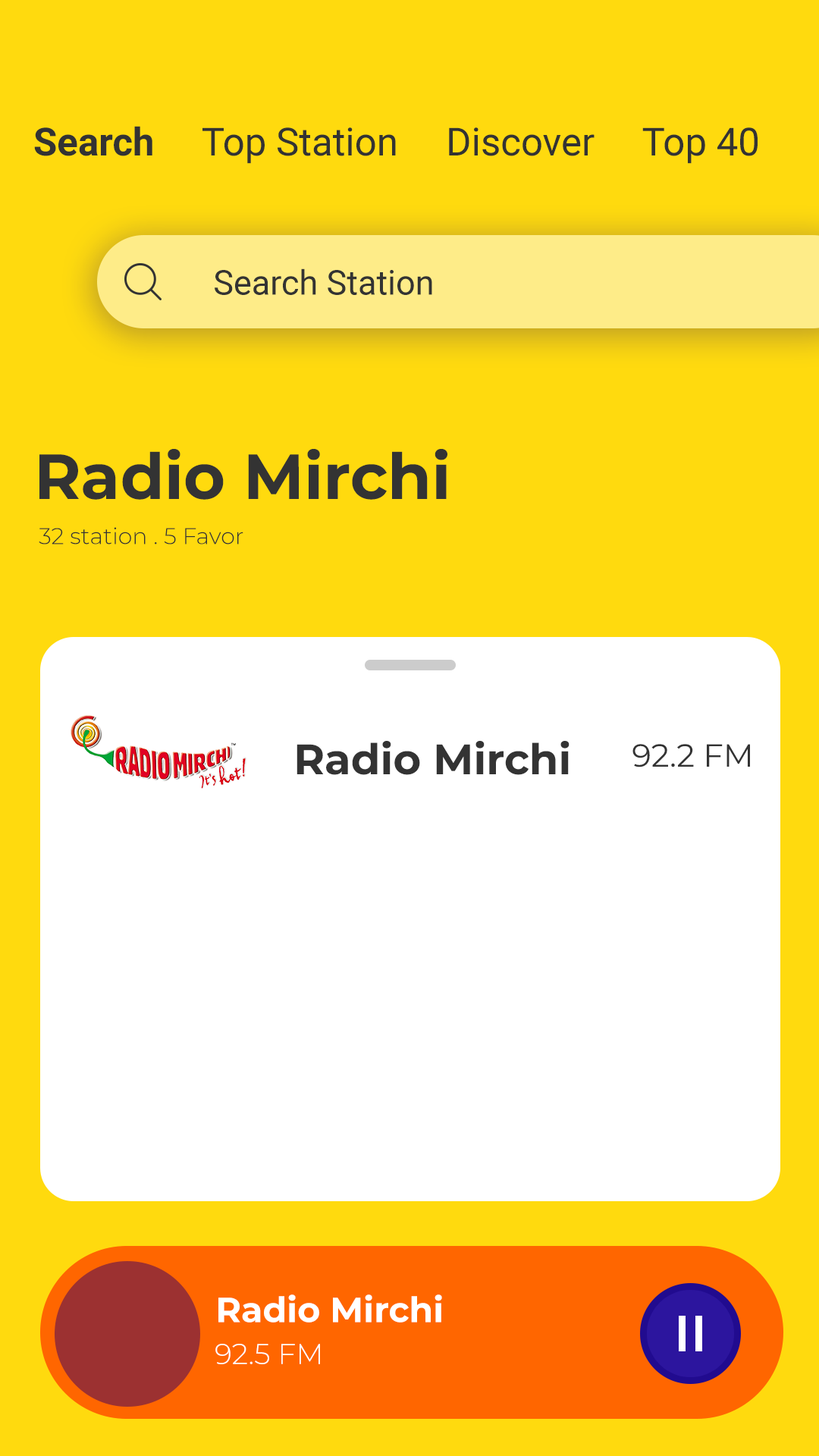
<style>
.page{position:relative;width:819px;height:1456px;background:#ffda0e}
.page>*{position:absolute;margin:0}
.t1{font:38.7px "Roboto-Regular";color:#333333}
.t2{font:38.7px "Roboto-Bold";color:#333333}
.t3{font:34.1px "Roboto-Regular";color:#333333}
.t4{font:63.7px "Montserrat-Bold";color:#333333}
.t5{font:22.7px "Montserrat-Light";color:#333333}
.t6{font:42.5px "Montserrat-Bold";color:#333333}
.t7{font:31.8px "Montserrat-Regular";color:#333333}
.t8{font:34.9px "Montserrat-Bold";color:#ffffff}
.t9{font:28.8px "Montserrat-Light";color:#ffffff}
</style>
<div class="page">
<p class="t1" style="left:34px;top:126px;width:724px;height:38px"><span class="t2">Search </span>    Top Station     Discover     Top 40</p>
<p class="t3" style="left:215px;top:268px;width:217px;height:27px">Search Station</p>
<p class="t4" style="left:39px;top:449px;width:408px;height:51px">Radio Mirchi</p>
<p class="t5" style="left:39px;top:527px;width:204px;height:17px">32 station . 5 Favor</p>
<p class="t6" style="left:297px;top:741px;width:273px;height:34px">Radio Mirchi</p>
<p class="t7" style="left:632px;top:744px;width:118px;height:23px">92.2 FM</p>
<p class="t8" style="left:218px;top:1294px;width:224px;height:29px">Radio Mirchi</p>
<p class="t9" style="left:215px;top:1344px;width:105px;height:20px">92.5 FM</p>
</div>
